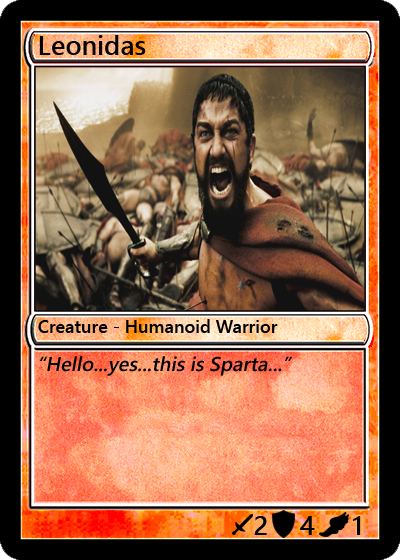
<style>
.page{position:relative;width:400px;height:560px}
.page>*{position:absolute;margin:0}
.t1{font:27px "YuGothicUI-Semibold";color:#000000}
.t2{font:18px "YuGothicUI-Semibold";color:#000000}
.t3{font:20px "YuGothicUI-Semibold";color:#000000;font-style:italic}
</style>
<div class="page">
<p class="t1" style="left:39px;top:35px;width:107px;height:20px">Leonidas</p>
<p class="t2" style="left:38px;top:319px;width:240px;height:14px">Creature - Humanoid Warrior</p>
<p class="t3" style="left:39px;top:356px;width:253px;height:20px">“Hello...yes...this is Sparta...”</p>
<p class="t1" style="left:254px;top:516px;width:13px;height:19px">2</p>
<p class="t1" style="left:300px;top:516px;width:15px;height:19px">4</p>
<p class="t1" style="left:353px;top:516px;width:8px;height:19px">1</p>
</div>
